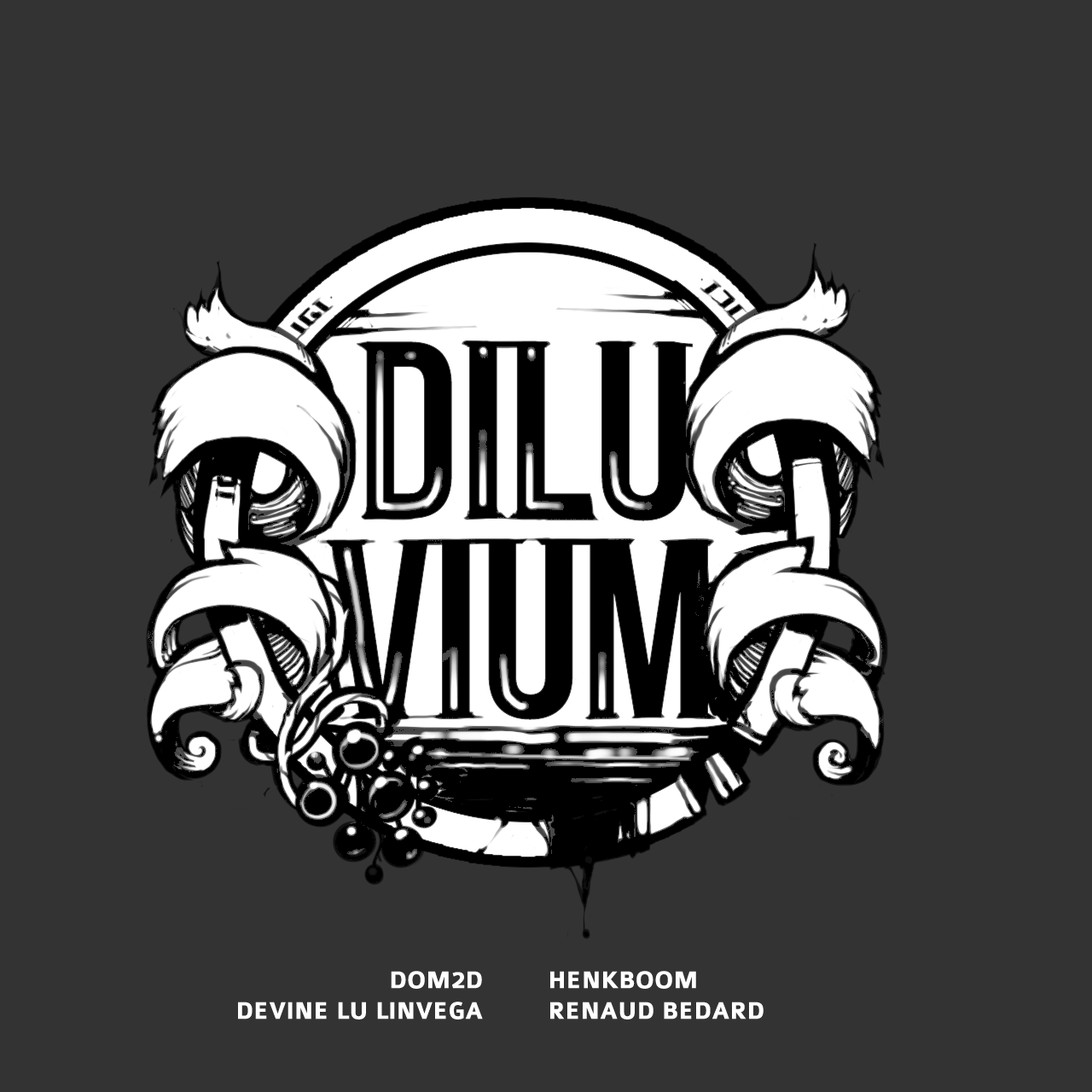
<style>
.page{position:relative;width:1092px;height:1092px;background:#333333}
.page>*{position:absolute;margin:0}
.t1{font:25.6px "Colaborate-Bold";color:#ffffff;text-transform:uppercase}
</style>
<div class="page">
<p class="t1" style="left:238px;top:971px;width:245px;height:48px;text-align:right">DOM2d<br>Devine LU LINVEGA</p>
<p class="t1" style="left:550px;top:971px;width:214px;height:48px">HENKBOOM<br>RENAUD BEDARD</p>
</div>
